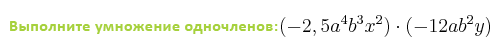
<style>
.page{position:relative;width:500px;height:50px;background:#ffffff}
.page>*{position:absolute;margin:0}
.t1{font:16px "Calibri-Bold";letter-spacing:0.03em;color:#a6d13d}
</style>
<div class="page">
<p class="t1" style="left:10px;top:21px;width:268px;height:13px">Выполните умножение одночленов:</p>
</div>
